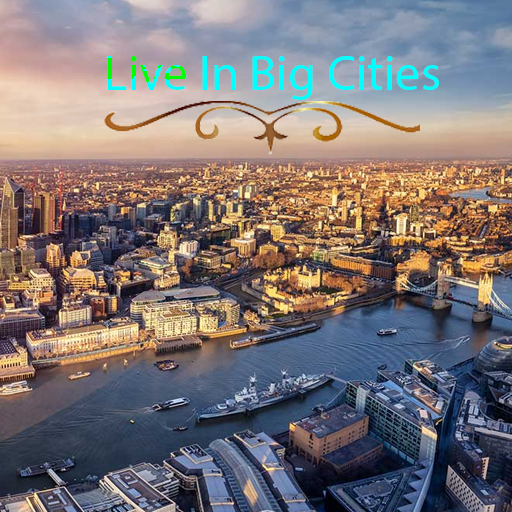
<style>
.page{position:relative;width:512px;height:512px}
.page>*{position:absolute;margin:0}
.t1{font:50px "MyriadPro-Regular";color:#00ffff}
</style>
<div class="page">
<p class="t1" style="left:107px;top:56px;width:332px;height:44px">Live In Big Cities</p>
</div>
